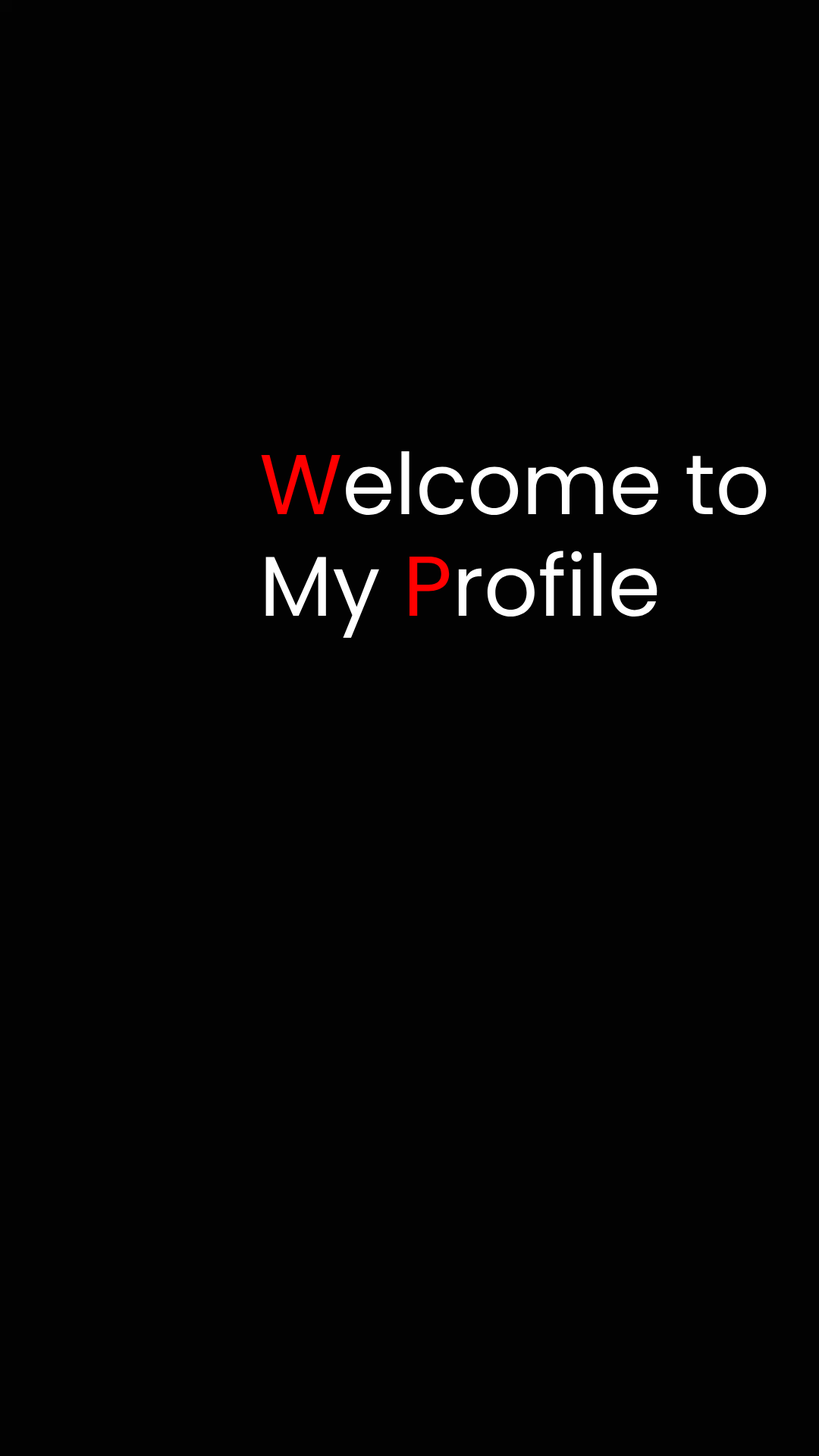
<style>
.page{position:relative;width:819px;height:1456px;background:#020202}
.page>*{position:absolute;margin:0}
.t1{font:84.9px "Poppins-Regular";color:#ffffff}
.t2{font:84.9px "Poppins-Regular";color:#ff0000}
</style>
<div class="page">
<p class="t1" style="left:261px;top:451px;width:506px;height:187px"><span class="t2">W</span>elcome to <br>My <span class="t2">P</span>rofile</p>
</div>
